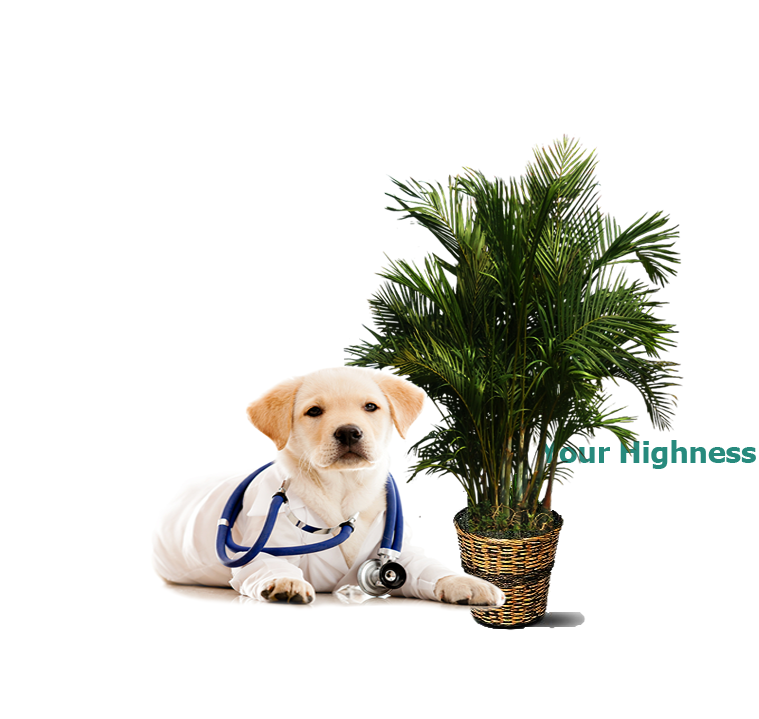
<style>
.page{position:relative;width:759px;height:719px;background:#ffffff}
.page>*{position:absolute;margin:0}
.t1{font:30px "Tahoma-Bold";color:#278a7d}
</style>
<div class="page">
<p class="t1" style="left:538px;top:440px;width:218px;height:29px">Your Highness</p>
</div>
